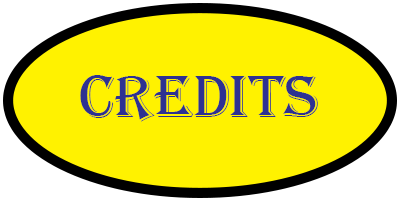
<style>
.page{position:relative;width:400px;height:200px;background:#fff200}
.page>*{position:absolute;margin:0}
.t1{font:62.5px "Algerian";color:#2e3192}
</style>
<div class="page">
<p class="t1" style="left:80px;top:75px;width:238px;height:47px">Credits</p>
</div>
